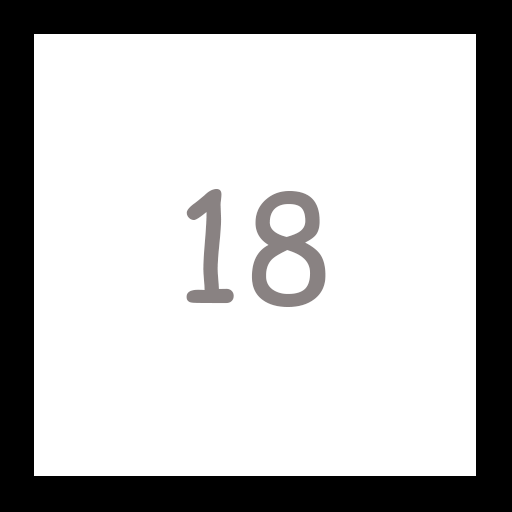
<style>
.page{position:relative;width:512px;height:512px;background:#ffffff}
.page>*{position:absolute;margin:0}
.t1{font:150px "ComicSansMS";color:#898282}
</style>
<div class="page">
<p class="t1" style="left:186px;top:189px;width:140px;height:118px">18</p>
</div>
